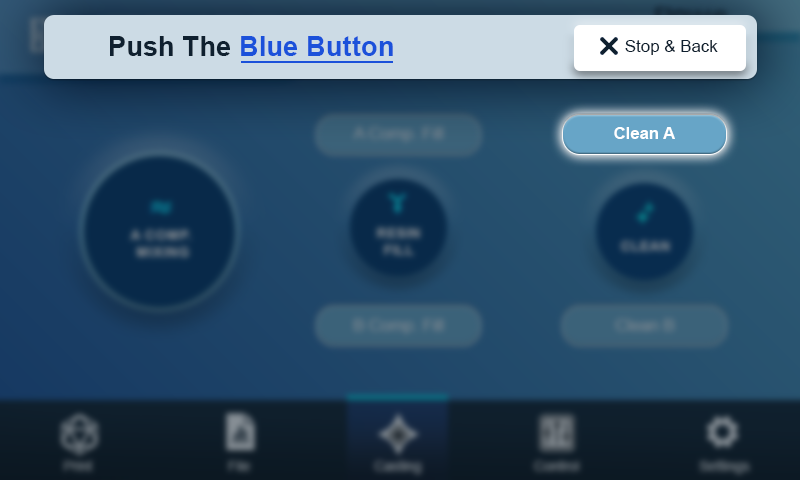
<style>
.page{position:relative;width:800px;height:480px}
.page>*{position:absolute;margin:0}
.t1{font:27.1px "Arial-BoldMT";letter-spacing:0.01em;color:#1b51da}
.t2{font:27.1px "Arial-BoldMT";letter-spacing:0.01em;color:#0f202f}
.t3{font:16.7px "ArialMT";letter-spacing:0.01em;color:#0f202f}
.t4{font:16.7px "Arial-BoldMT";color:#ffffff}
</style>
<div class="page">
<p class="t1" style="left:110px;top:36px;width:283px;height:20px"><span class="t2">Push The </span>Blue Button</p>
<p class="t3" style="left:625px;top:40px;width:93px;height:15px">Stop &amp; Back</p>
<p class="t4" style="left:614px;top:127px;width:61px;height:12px">Clean A</p>
</div>
